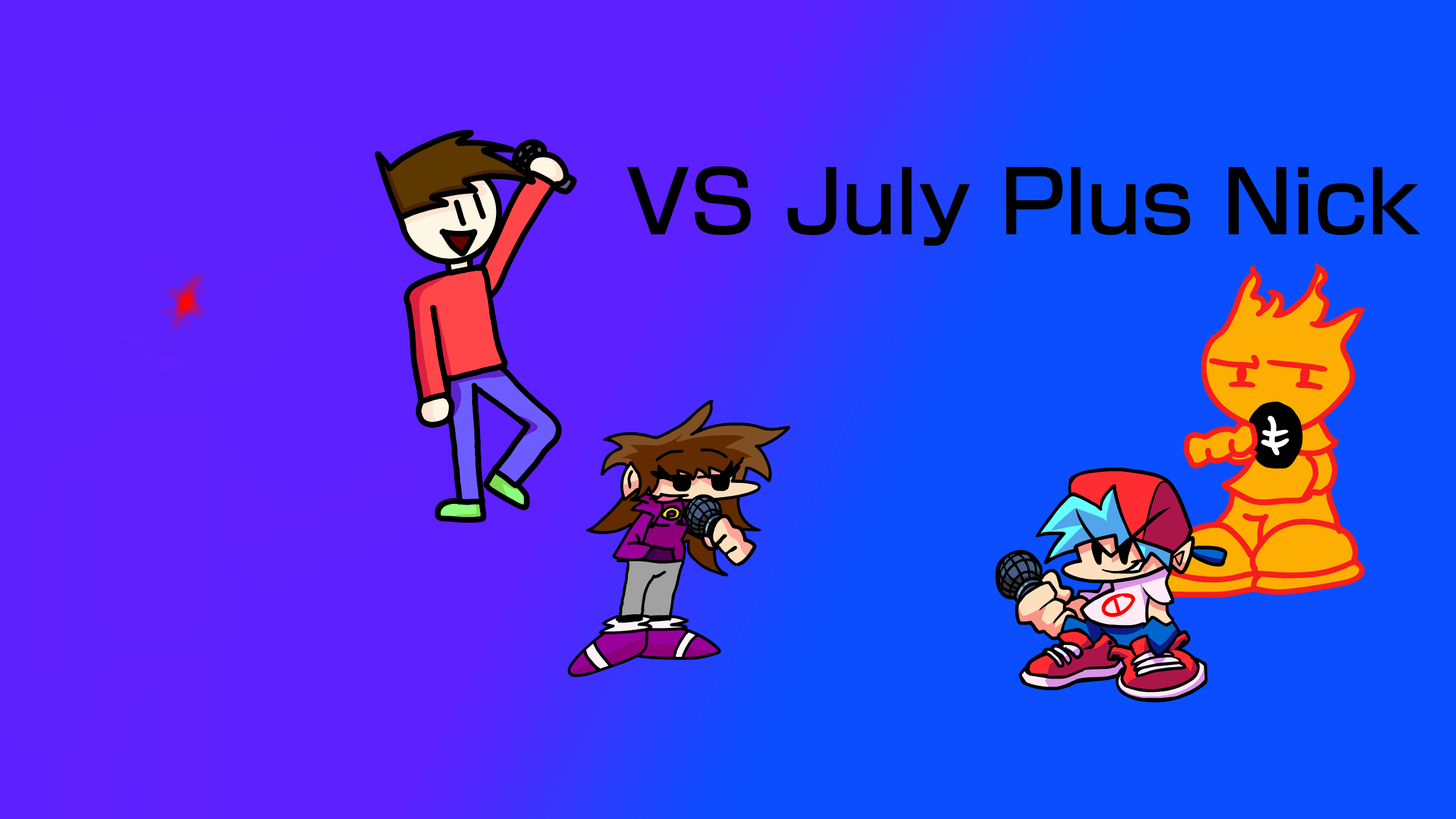
<style>
.page{position:relative;width:1456px;height:819px;background:#0a4eff}
.page>*{position:absolute;margin:0}
.t1{font:85.3px "ShinGoPro-Medium";color:#000000}
</style>
<div class="page">
<p class="t1" style="left:627px;top:166px;width:794px;height:80px">VS July Plus Nick</p>
</div>
